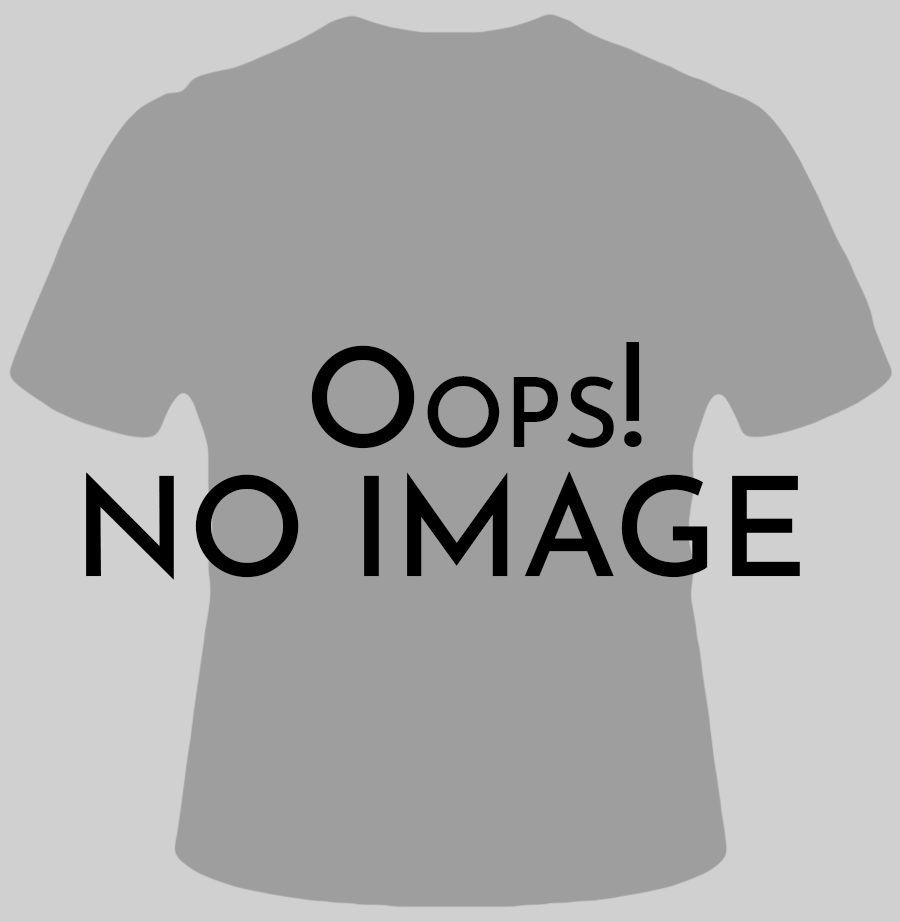
<style>
.page{position:relative;width:900px;height:922px;background:#9e9e9e}
.page>*{position:absolute;margin:0}
.t1{font:138px "JosefinSans-Medium";color:#000000;font-variant:small-caps}
.t2{font:138px "JosefinSans-Medium";color:#000000;text-transform:uppercase}
</style>
<div class="page">
<p class="t1" style="left:311px;top:342px;width:331px;height:107px">Oops!</p>
<p class="t2" style="left:86px;top:471px;width:714px;height:109px">No Image</p>
</div>
